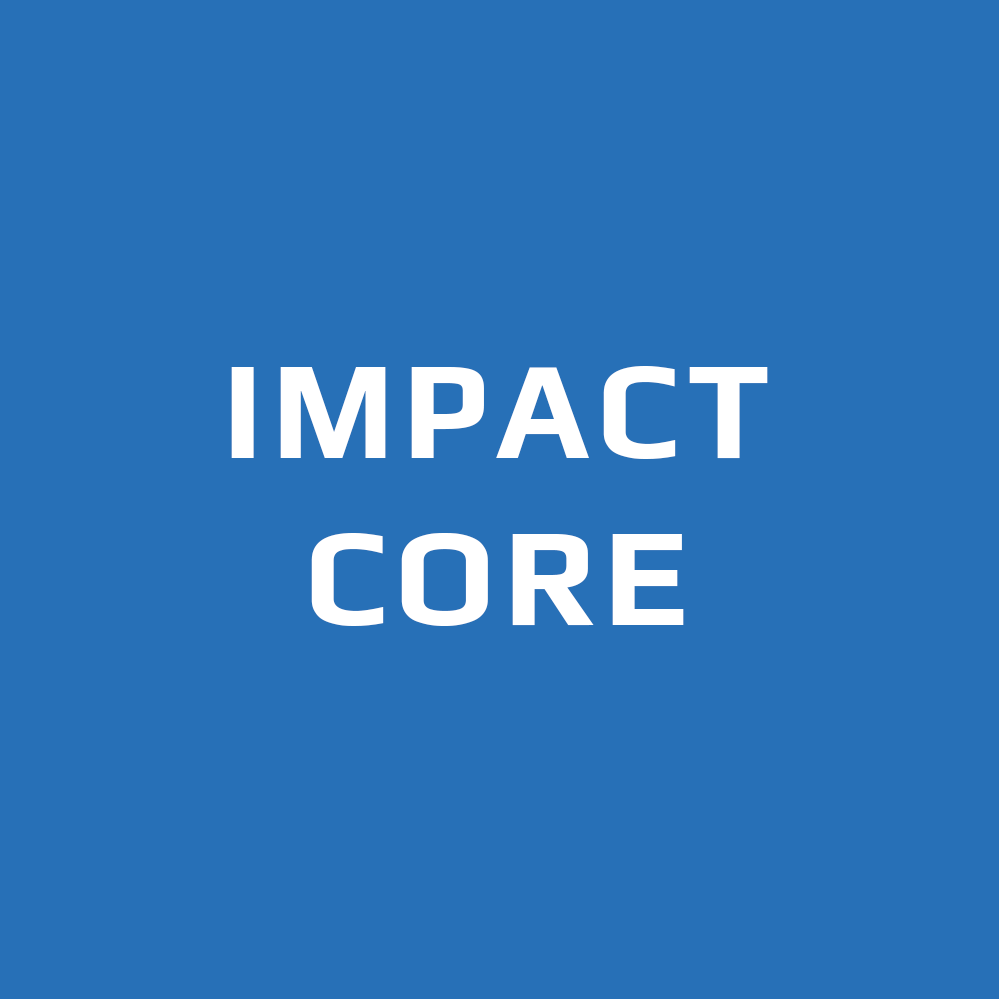
<style>
.page{position:relative;width:999px;height:999px;background:#2770b7}
.page>*{position:absolute;margin:0}
.t1{font:139.5px "Play-Bold";letter-spacing:0.05em;color:#ffffff}
</style>
<div class="page">
<p class="t1" style="left:231px;top:366px;width:537px;height:260px;text-align:center">IMPACT<br>CORE</p>
</div>
